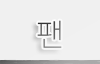
<style>
.page{position:relative;width:100px;height:64px;background:#f0f0f0}
.page>*{position:absolute;margin:0}
.t1{font:30px "NanumSquareL";color:#474747}
</style>
<div class="page">
<p class="t1" style="left:37px;top:20px;width:25px;height:28px">팬</p>
</div>
